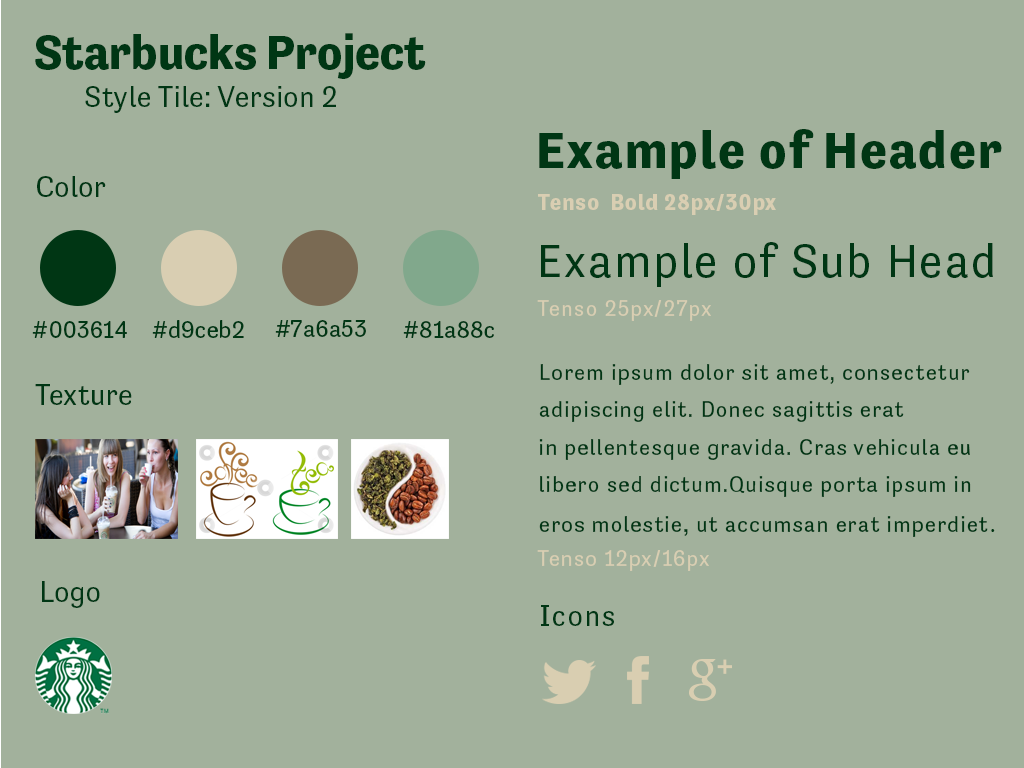
<style>
.page{position:relative;width:1024px;height:768px;background:#a2b19c}
.page>*{position:absolute;margin:0}
.t1{font:48.8px "Tenso-Bold";color:#003614}
.t2{font:30px "Tenso-Regular";color:#003614}
.t3{font:52.5px "Tenso-Bold";letter-spacing:0.044em;color:#003614}
.t4{font:22.5px "Tenso-Bold";letter-spacing:0.044em;color:#d9ceb2}
.t5{font:46.9px "Tenso-Regular";letter-spacing:0.044em;color:#003614}
.t6{font:12px/45px "Tenso-Regular";letter-spacing:0.044em;color:#d9ceb2}
.t7{font:24.4px "Tenso-Regular";color:#003614}
.t8{font:22.5px/37.5px "Tenso-Regular";letter-spacing:0.044em;color:#003614}
.t9{font:22.5px/40px "CenturyGothic";letter-spacing:0.044em;color:#003614}
.t10{font:22.5px "Tenso-Regular";letter-spacing:0.044em;color:#d9ceb2}
.t11{font:30px "Tenso-Regular";letter-spacing:0.044em;color:#003614}
</style>
<div class="page">
<p class="t1" style="left:35px;top:33px;width:391px;height:46px">Starbucks Project</p>
<p class="t2" style="left:85px;top:86px;width:251px;height:27px">Style Tile: Version 2</p>
<p class="t3" style="left:539px;top:129px;width:463px;height:50px">Example of Header</p>
<p class="t2" style="left:37px;top:176px;width:69px;height:21px">Color</p>
<p class="t4" style="left:538px;top:194px;width:238px;height:21px">Tenso  Bold 28px/30px</p>
<p class="t5" style="left:541px;top:242px;width:452px;height:45px">Example of Sub Head</p>
<p class="t6" style="left:537px;top:300px;width:174px;height:21px">Tenso 25px/27px</p>
<p class="t7" style="left:32px;top:321px;width:95px;height:17px">#003614</p>
<p class="t7" style="left:152px;top:320px;width:92px;height:18px">#d9ceb2</p>
<p class="t7" style="left:275px;top:320px;width:91px;height:17px">#7a6a53</p>
<p class="t7" style="left:403px;top:321px;width:91px;height:17px">#81a88c</p>
<p class="t8" style="left:539px;top:364px;width:456px;height:173px">Lorem ipsum dolor sit amet, consectetur <br>adipiscing elit. Donec sagittis erat <br>in pellentesque gravida. Cras vehicula eu <br>libero sed dictum.Quisque porta ipsum in<br>eros molestie, ut accumsan erat imperdiet<span class="t9">.</span></p>
<p class="t2" style="left:35px;top:384px;width:97px;height:21px">Texture</p>
<p class="t10" style="left:537px;top:550px;width:172px;height:21px">Tenso 12px/16px</p>
<p class="t2" style="left:42px;top:581px;width:58px;height:27px">Logo</p>
<p class="t11" style="left:541px;top:605px;width:73px;height:21px">Icons</p>
</div>
